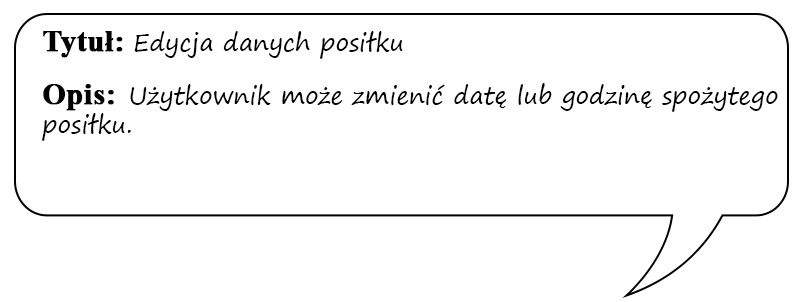
<style>
.page{position:relative;width:800px;height:302px;background:#ffffff}
.page>*{position:absolute;margin:0}
.t1{font:24px "SegoePrint";color:#000000}
.t2{font:30px "TimesNewRomanPS-BoldMT";color:#000000;font-weight:bold}
</style>
<div class="page">
<p class="t1" style="left:42px;top:31px;width:736px;height:110px"><span class="t2">Tytuł: </span>Edycja danych posiłku<br><br><span class="t2">Opis:  </span>Użytkownik może zmienić datę lub godzinę spożytego posiłku.</p>
</div>
